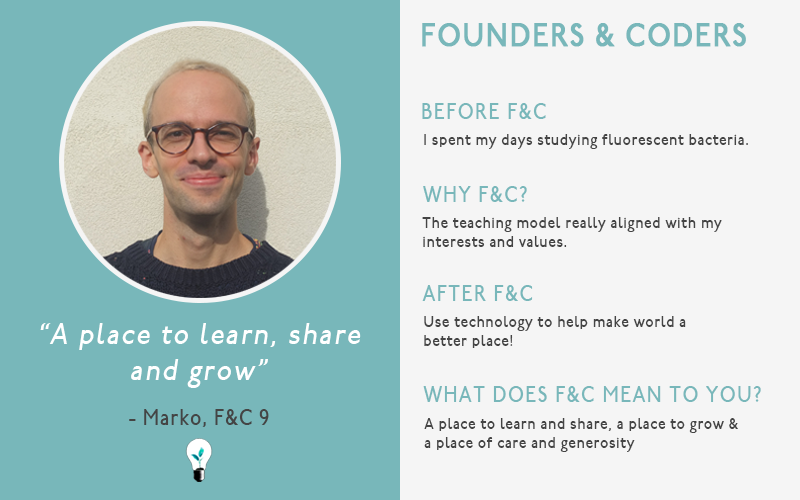
<style>
.page{position:relative;width:800px;height:500px;background:#f5f5f5}
.page>*{position:absolute;margin:0}
.t1{font:32px "P22UndergroundMedium";letter-spacing:0.05em;color:#78b7ba;font-weight:bold;scale:0.86 1}
.t2{font:22px "P22UndergroundMedium";letter-spacing:0.075em;color:#78b7ba;scale:0.86 1}
.t3{font:16px "P22UndergroundMedium";letter-spacing:0.05em;color:#444444;scale:0.86 1}
.t4{font:30px "P22UndergroundMedium";letter-spacing:0.075em;color:#ffffff;font-style:italic;scale:0.86 1}
.t5{font:22px "P22UndergroundMedium";letter-spacing:0.05em;color:#444444;scale:0.86 1}
</style>
<div class="page">
<p class="t1" style="left:422px;top:23px;width:324px;height:24px">FOUNDERS &amp; CODERS</p>
<p class="t2" style="left:422px;top:103px;width:124px;height:16px">BEFORE F&amp;C</p>
<p class="t3" style="left:424px;top:134px;width:324px;height:15px">I spent my days studying fluorescent bacteria.</p>
<p class="t2" style="left:423px;top:186px;width:104px;height:16px">WHY F&amp;C?</p>
<p class="t3" style="left:422px;top:217px;width:300px;height:30px">The teaching model really aligned with my <br>interests and values.</p>
<p class="t2" style="left:422px;top:285px;width:111px;height:16px">AFTER F&amp;C</p>
<p class="t3" style="left:424px;top:316px;width:262px;height:32px">Use technology to help make world a <br>better place!</p>
<p class="t4" style="left:40px;top:323px;width:321px;height:65px;text-align:center">“A place to learn, share<br>and grow”</p>
<p class="t2" style="left:423px;top:386px;width:338px;height:16px">WHAT DOES F&amp;C MEAN TO YOU?</p>
<p class="t5" style="left:129px;top:409px;width:140px;height:18px">- Marko, F&amp;C 9</p>
<p class="t3" style="left:424px;top:418px;width:314px;height:34px">A place to learn and share, a place to grow &amp; <br>a place of care and generosity</p>
</div>
